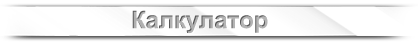
<style>
.page{position:relative;width:418px;height:43px;background:#ffffff}
.page>*{position:absolute;margin:0}
.t1{font:23.8px "Arial-BoldMT"}
</style>
<div class="page">
<p class="t1" style="left:132px;top:10px;width:136px;height:24px">Калкулатор</p>
</div>
